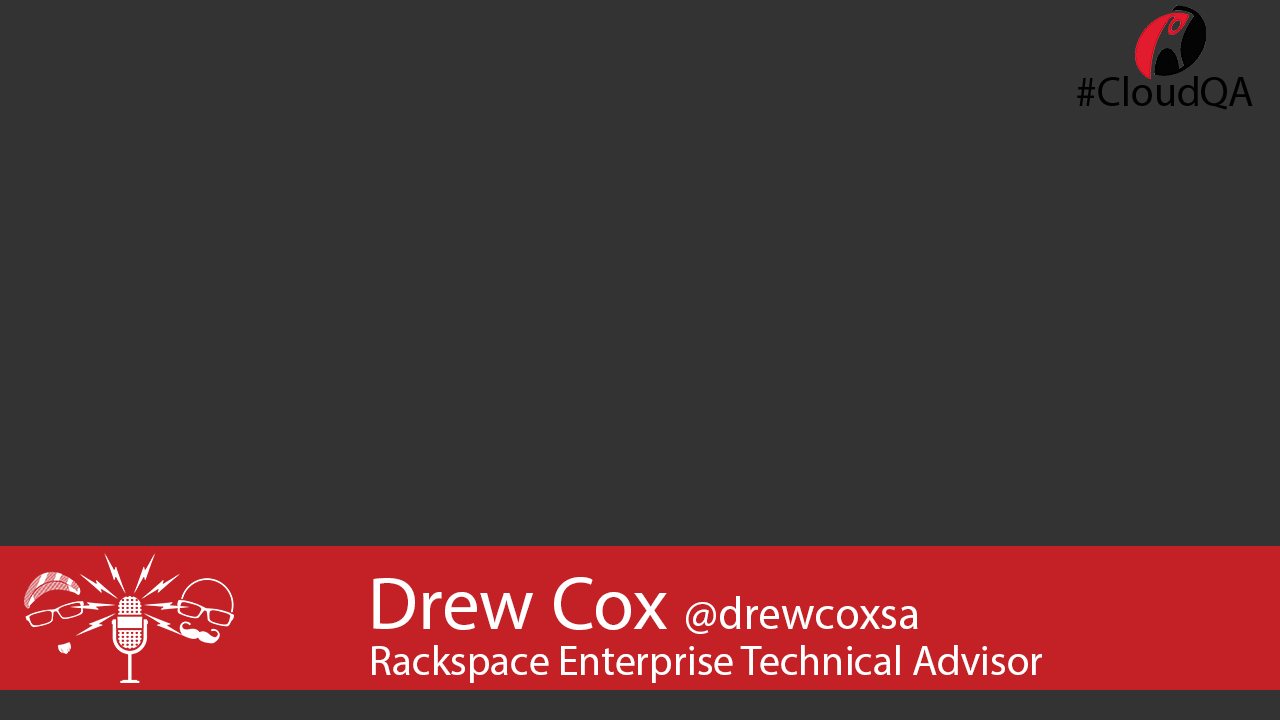
<style>
.page{position:relative;width:1280px;height:720px;background:#333333}
.page>*{position:absolute;margin:0}
.t1{font:41.7px "MyriadPro-Regular";color:#000000}
.t2{font:45.8px "MyriadPro-Regular";color:#ffffff}
.t3{font:75px "MyriadPro-Regular";color:#ffffff}
.t4{font:41.7px "MyriadPro-Regular";color:#ffffff}
</style>
<div class="page">
<p class="t1" style="left:1077px;top:76px;width:176px;height:34px">#CloudQA</p>
<p class="t2" style="left:373px;top:577px;width:545px;height:57px"><span class="t3">Drew Cox </span>@drewcoxsa</p>
<p class="t4" style="left:372px;top:645px;width:670px;height:38px">Rackspace Enterprise Technical Advisor</p>
</div>
